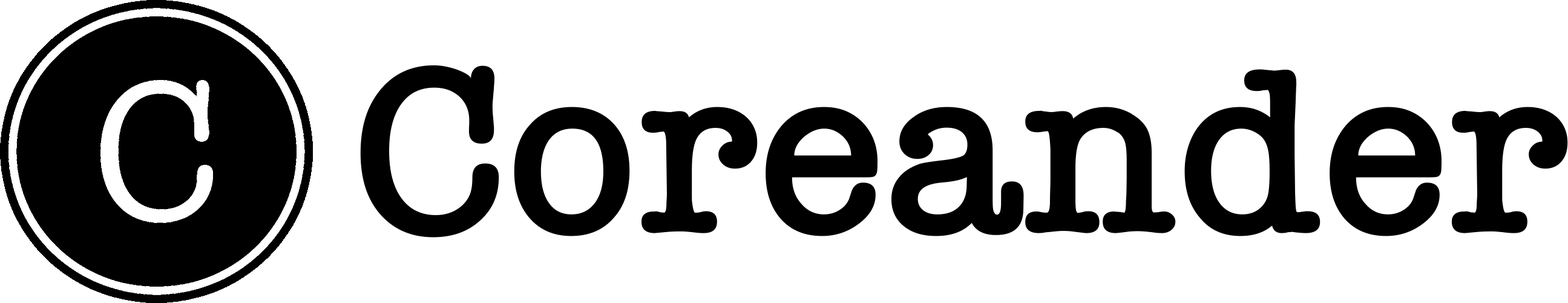
<style>
.page{position:relative;width:1568px;height:303px;background:#ffffff}
.page>*{position:absolute;margin:0}
.t1{font:242.1px "AmericanTypewriter-Semibold";color:#000000}
</style>
<div class="page">
<p class="t1" style="left:360px;top:65px;width:1208px;height:172px">Coreander</p>
</div>
